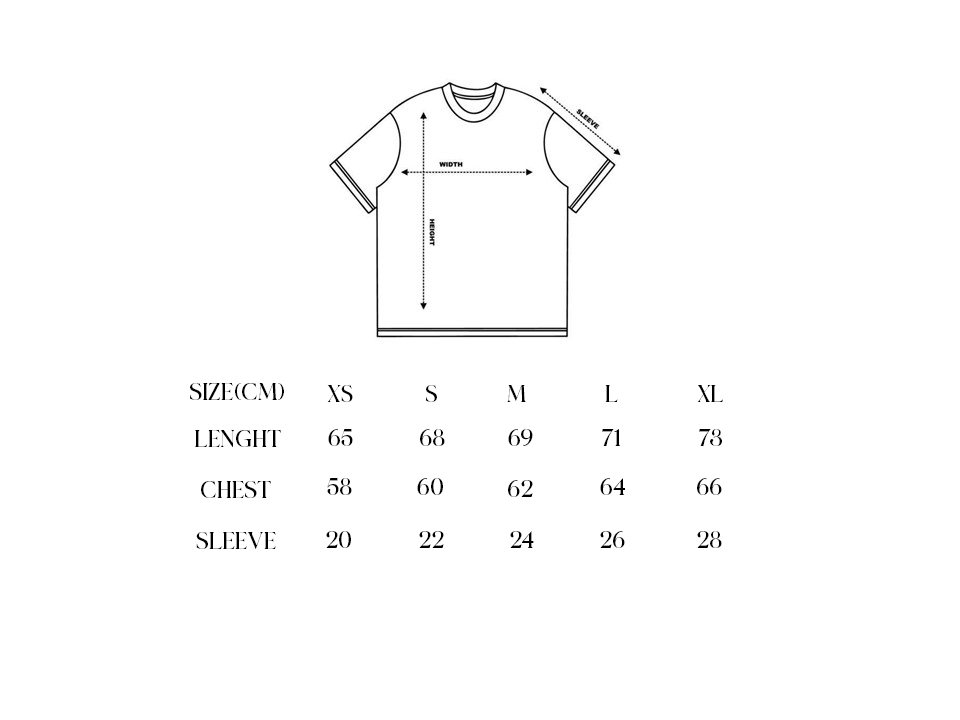
<style>
.page{position:relative;width:960px;height:720px;background:#ffffff}
.page>*{position:absolute;margin:0}
.t1{font:24.5px "BelgianoSerif-Regular";color:#000000}
.t2{font:24px "BelgianoSerif-Regular";color:#000000}
</style>
<div class="page">
<p class="t1" style="left:190px;top:383px;width:94px;height:17px">SIZE(CM)</p>
<p class="t2" style="left:327px;top:385px;width:26px;height:17px">XS</p>
<p class="t2" style="left:426px;top:385px;width:11px;height:17px">S</p>
<p class="t2" style="left:507px;top:385px;width:19px;height:17px">M</p>
<p class="t2" style="left:605px;top:385px;width:13px;height:17px">L</p>
<p class="t2" style="left:697px;top:385px;width:26px;height:17px">XL</p>
<p class="t1" style="left:195px;top:430px;width:86px;height:17px">LENGHT</p>
<p class="t2" style="left:328px;top:429px;width:25px;height:17px">65</p>
<p class="t2" style="left:420px;top:429px;width:25px;height:17px">68</p>
<p class="t2" style="left:508px;top:429px;width:25px;height:17px">69</p>
<p class="t2" style="left:602px;top:429px;width:19px;height:17px">71</p>
<p class="t2" style="left:699px;top:429px;width:23px;height:17px">73</p>
<p class="t1" style="left:201px;top:481px;width:70px;height:17px">CHEST</p>
<p class="t2" style="left:327px;top:478px;width:25px;height:17px">58</p>
<p class="t2" style="left:417px;top:478px;width:26px;height:17px">60</p>
<p class="t2" style="left:508px;top:480px;width:25px;height:17px">62</p>
<p class="t2" style="left:600px;top:478px;width:25px;height:17px">64</p>
<p class="t2" style="left:697px;top:478px;width:25px;height:17px">66</p>
<p class="t1" style="left:196px;top:532px;width:80px;height:17px">SLEEVE</p>
<p class="t2" style="left:326px;top:531px;width:25px;height:17px">20</p>
<p class="t2" style="left:419px;top:531px;width:25px;height:17px">22</p>
<p class="t2" style="left:510px;top:531px;width:24px;height:17px">24</p>
<p class="t2" style="left:600px;top:531px;width:25px;height:17px">26</p>
<p class="t2" style="left:697px;top:531px;width:25px;height:17px">28</p>
</div>
